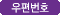
<style>
.page{position:relative;width:60px;height:15px;background:#692e8c}
.page>*{position:absolute;margin:0}
.t1{font:11px "YDIYGO120-KSCpc-EUC-H";letter-spacing:-0.05em;color:#ffffff;text-transform:uppercase;scale:0.9 1}
</style>
<div class="page">
<p class="t1" style="left:11px;top:2px;width:38px;height:11px">우편번호</p>
</div>
